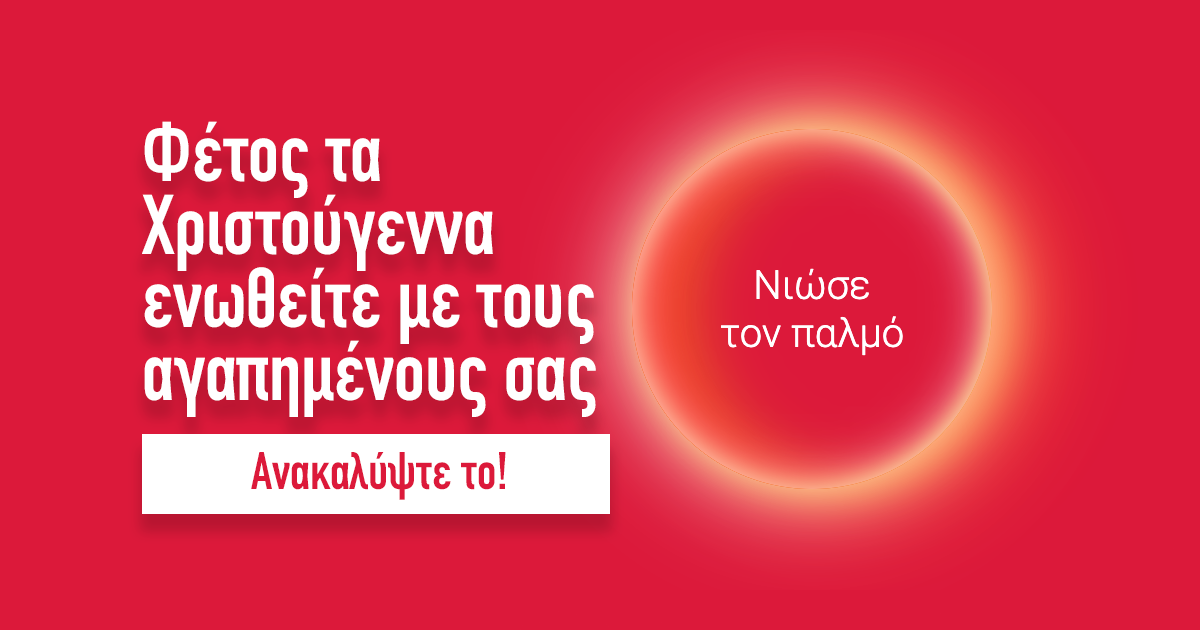
<style>
.page{position:relative;width:1200px;height:630px;background:#dc193a}
.page>*{position:absolute;margin:0}
.t1{font:83.3px/72.9px "DINCondensed-Bold";color:#ffffff}
.t2{font:52.1px "DINCondensed-Bold";color:#dc193a}
</style>
<div class="page">
<p class="t1" style="left:142px;top:121px;width:454px;height:296px">Φέτος τα Χριστούγεννα ενωθείτε με τους αγαπημένους σας</p>
<p class="t2" style="left:251px;top:452px;width:255px;height:48px">Ανακαλύψτε το!</p>
</div>
